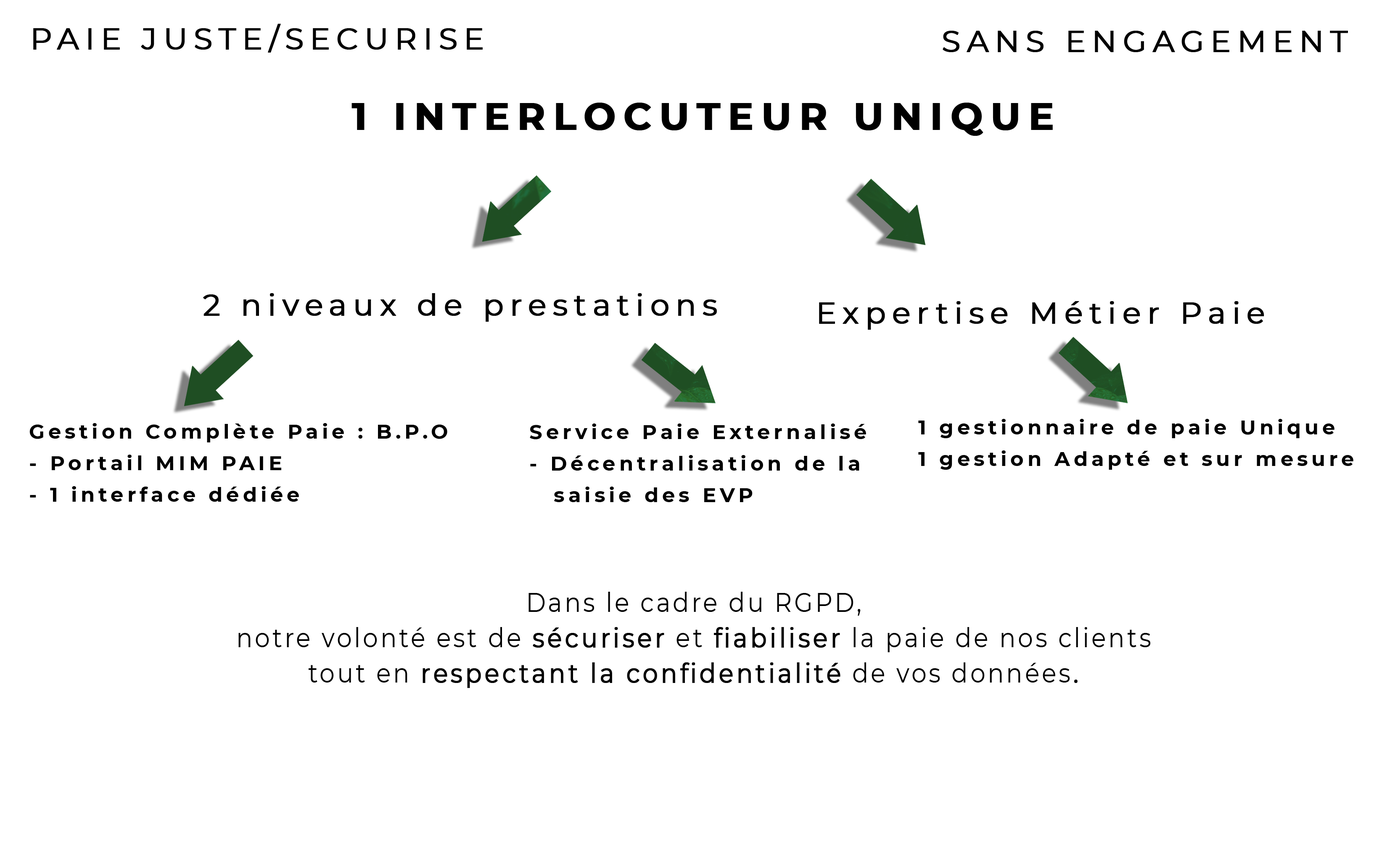
<style>
.page{position:relative;width:1374px;height:868px;background:#ffffff}
.page>*{position:absolute;margin:0}
.t1{font:30.3px "Montserrat-Regular";letter-spacing:0.185em;color:#000000;font-weight:bold}
.t2{font:37.8px "Montserrat-Bold";letter-spacing:0.185em;color:#000000;font-weight:bold}
.t3{font:20.2px/31.5px "Montserrat-Bold";letter-spacing:0.185em;color:#000000}
.t4{font:26.6px/35.3px "Montserrat-Regular";letter-spacing:0.1em;color:#000000;scale:0.9 1}
.t5{font:26.6px/35.3px "Montserrat-Regular";letter-spacing:0.1em;color:#000000;font-weight:bold;scale:0.9 1}
</style>
<div class="page">
<p class="t1" style="left:33px;top:24px;width:450px;height:29px">PAIE JUSTE/SECURISE</p>
<p class="t1" style="left:943px;top:31px;width:405px;height:21px">SANS ENGAGEMENT</p>
<p class="t2" style="left:352px;top:103px;width:701px;height:33px">1 INTERLOCUTEUR UNIQUE</p>
<p class="t1" style="left:203px;top:293px;width:514px;height:29px">2 niveaux de prestations</p>
<p class="t1" style="left:819px;top:301px;width:445px;height:29px">Expertise Métier Paie</p>
<p class="t3" style="left:29px;top:423px;width:418px;height:79px">Gestion Complète Paie : B.P.O<br>- Portail MIM PAIE <br>- 1 interface dédiée</p>
<p class="t3" style="left:530px;top:423px;width:336px;height:79px">Service Paie Externalisé<br>- Décentralisation de la <br>  saisie des EVP</p>
<p class="t3" style="left:918px;top:419px;width:435px;height:51px">1 gestionnaire de paie Unique<br>1 gestion Adapté et sur mesure</p>
<p class="t4" style="left:238px;top:592px;width:912px;height:96px;text-align:center">Dans le cadre du RGPD, <br>notre volonté est de <span class="t5">sécuriser</span> et <span class="t5">fiabiliser</span> la paie de nos clients <br>tout en <span class="t5">respectant la confidentialité</span> de vos données<span class="t5">.</span></p>
</div>
